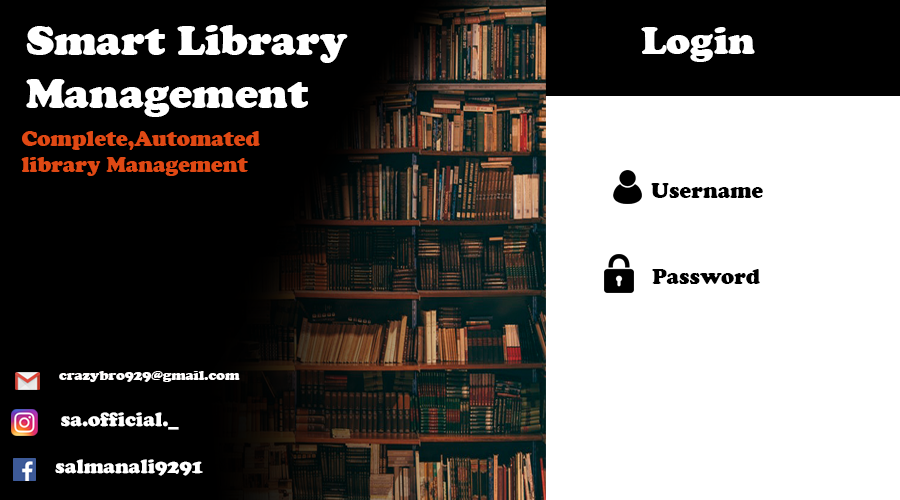
<style>
.page{position:relative;width:900px;height:500px;background:#ffffff}
.page>*{position:absolute;margin:0}
.t1{font:44px "CooperBlack";color:#ffffff}
.t2{font:40px "CooperBlack";color:#ffffff}
.t3{font:22px "CooperBlack";color:#df4914}
.t4{font:22px "CooperBlack";color:#000000}
.t5{font:14.4px "CooperBlack";color:#fffefe}
.t6{font:20.4px "CooperBlack";color:#ffffff}
</style>
<div class="page">
<p class="t1" style="left:26px;top:25px;width:322px;height:92px">Smart Library Management <br>System</p>
<p class="t2" style="left:641px;top:27px;width:114px;height:35px">Login</p>
<p class="t3" style="left:21px;top:131px;width:239px;height:45px">Complete,Automated<br>library Management</p>
<p class="t4" style="left:651px;top:183px;width:112px;height:15px">Username</p>
<p class="t4" style="left:652px;top:269px;width:108px;height:15px">Password</p>
<p class="t5" style="left:59px;top:371px;width:181px;height:11px">crazybro929@gmail.com</p>
<p class="t6" style="left:61px;top:412px;width:118px;height:18px">sa.official._</p>
<p class="t6" style="left:55px;top:459px;width:148px;height:17px">salmanali9291</p>
</div>
